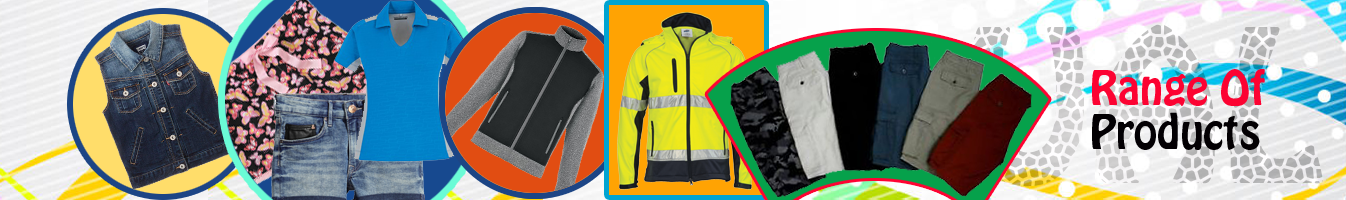
<style>
.page{position:relative;width:1346px;height:200px}
.page>*{position:absolute;margin:0}
.t1{font:42px/44px "HoboStd";color:#fc0332}
.t2{font:42px/44px "HoboStd";color:#030003}
</style>
<div class="page">
<p class="t1" style="left:1092px;top:69px;width:173px;height:81px">Range Of<br><span class="t2">Products</span></p>
</div>
